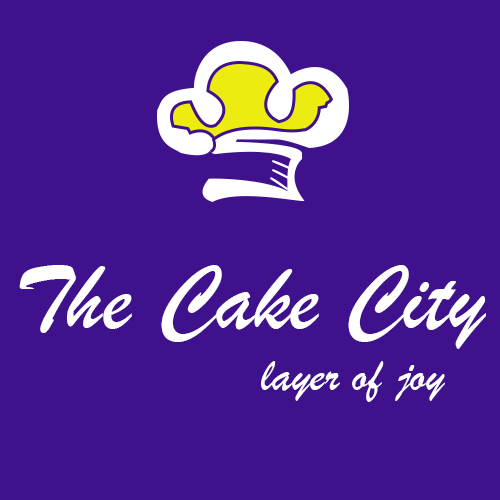
<style>
.page{position:relative;width:500px;height:500px;background:#3f118c}
.page>*{position:absolute;margin:0}
.t1{font:96.2px "BrushScriptMT";color:#ffffff}
.t2{font:48.6px "BrushScriptMT";color:#ffffff}
</style>
<div class="page">
<p class="t1" style="left:19px;top:265px;width:467px;height:84px">The Cake City</p>
<p class="t2" style="left:261px;top:361px;width:184px;height:41px">layer of joy</p>
</div>
